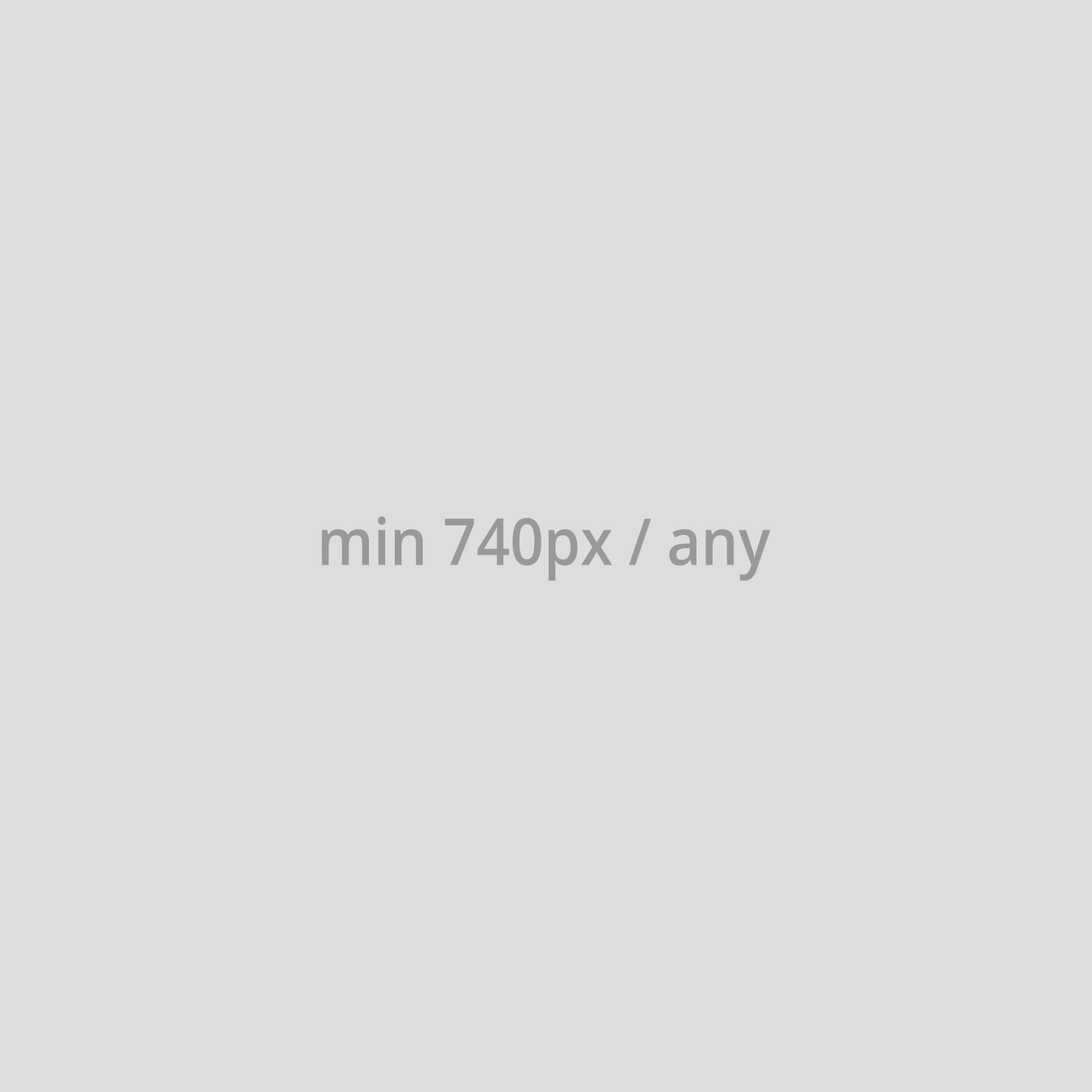
<style>
.page{position:relative;width:1092px;height:1092px;background:#dddddd}
.page>*{position:absolute;margin:0}
.t1{font:64.9px "OpenSans-Semibold";color:#999999;scale:0.91 1}
</style>
<div class="page">
<p class="t1" style="left:322px;top:516px;width:448px;height:65px">min 740px / any</p>
</div>
